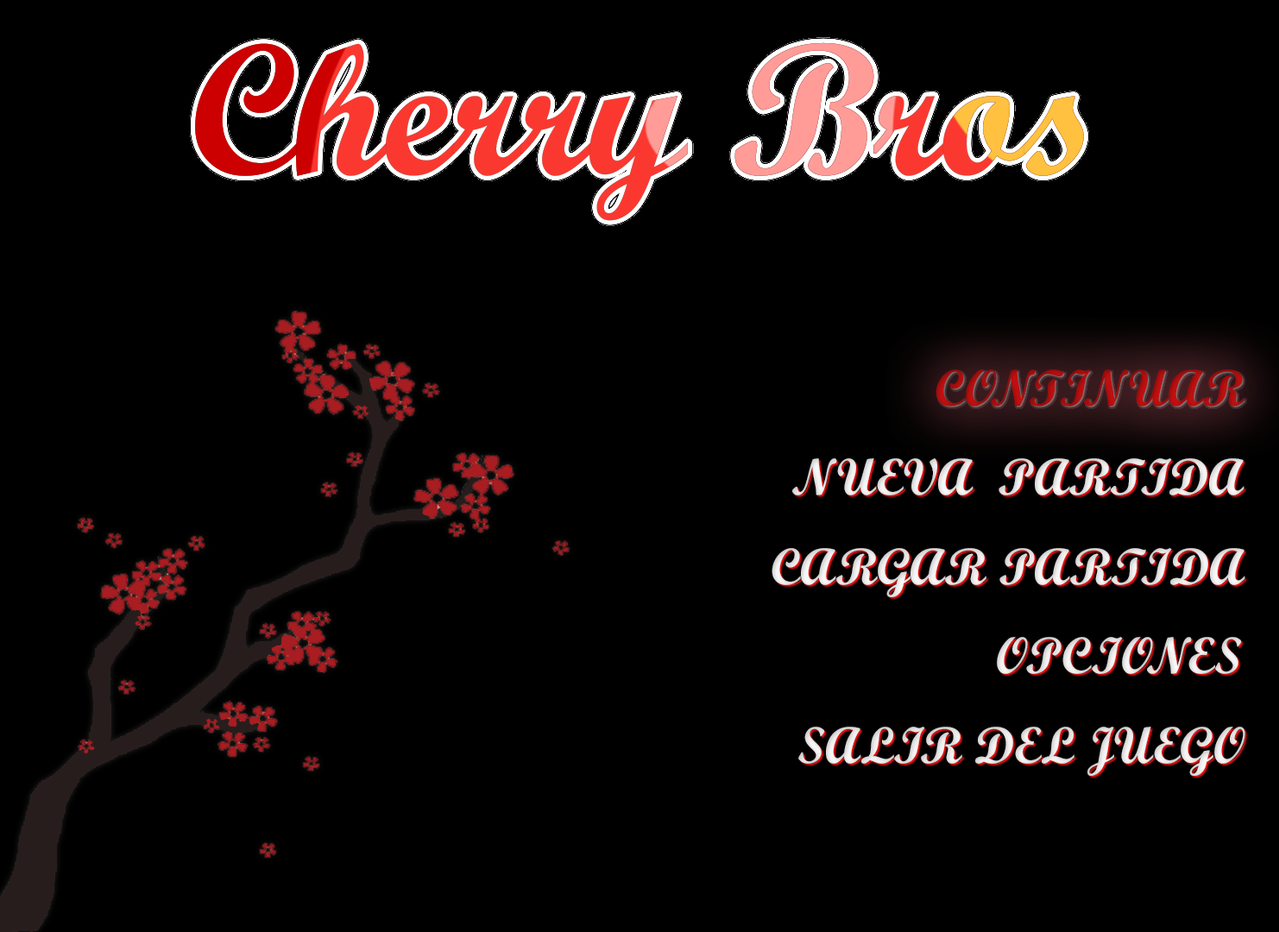
<style>
.page{position:relative;width:1279px;height:932px;background:#000000}
.page>*{position:absolute;margin:0}
.t1{font:51.8px "ScriptMTBold";color:#ad0e0e}
.t2{font:51.8px "ScriptMTBold";color:#e6e6e6}
.t3{font:51.8px "ScriptMTBold";color:#e3e3e3}
.t4{font:51.8px "ScriptMTBold";color:#e5e5e5}
</style>
<div class="page">
<p class="t1" style="left:936px;top:369px;width:309px;height:38px">CONTINUAR</p>
<p class="t2" style="left:792px;top:458px;width:453px;height:37px">NUEVA  PARTIDA</p>
<p class="t2" style="left:772px;top:548px;width:474px;height:49px">CARGAR PARTIDA</p>
<p class="t3" style="left:997px;top:637px;width:245px;height:37px">OPCIONES</p>
<p class="t4" style="left:798px;top:727px;width:448px;height:49px">SALIR DEL JUEGO</p>
</div>
